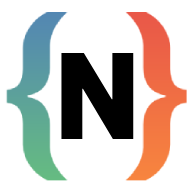
<style>
.page{position:relative;width:192px;height:192px;background:#ffffff}
.page>*{position:absolute;margin:0}
.t1{font:124.8px "Saira-Bold";color:#000000}
</style>
<div class="page">
<p class="t1" style="left:61px;top:53px;width:73px;height:86px">N</p>
</div>
